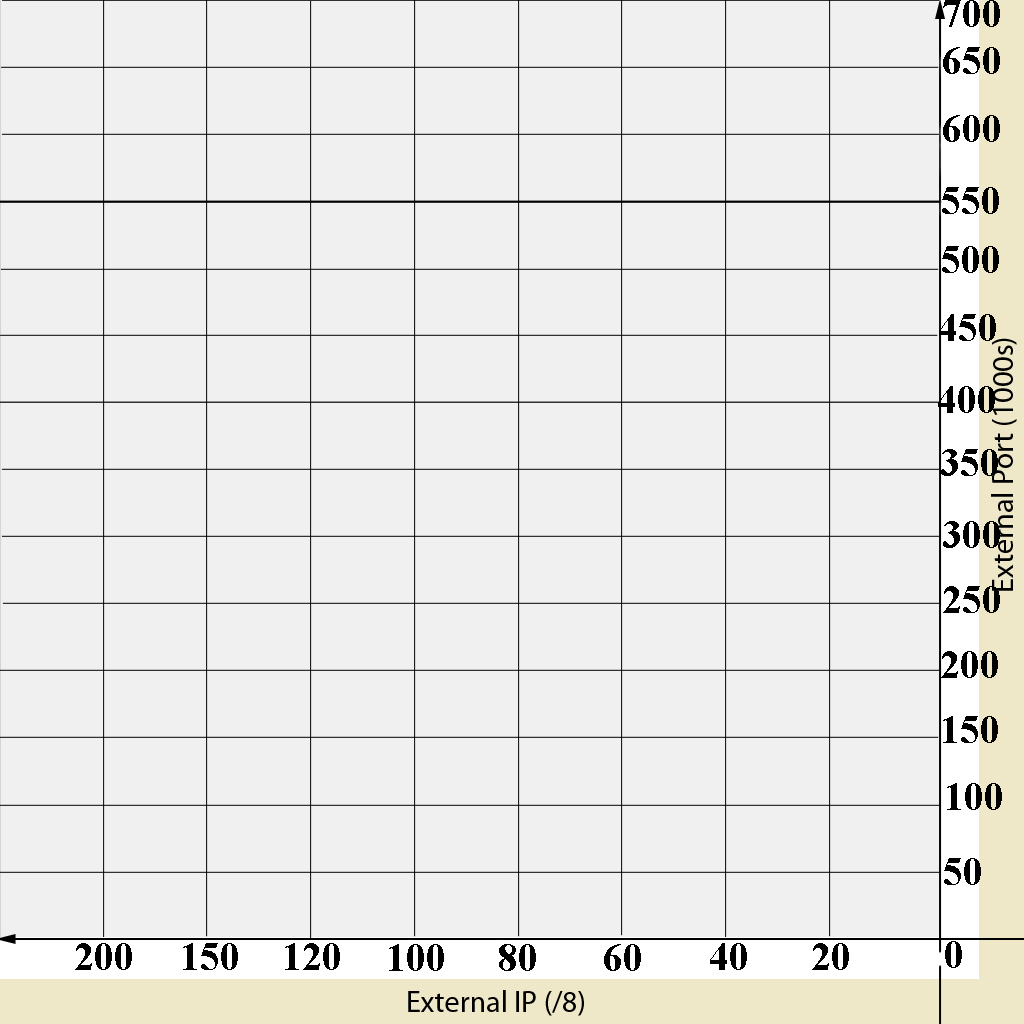
<style>
.page{position:relative;width:1024px;height:1024px;background:#f0f0f0}
.page>*{position:absolute;margin:0}
.t1{font:40px "TimesNewRomanPS-BoldMT";color:#000000}
</style>
<div class="page">
<p class="t1" style="left:943px;top:0px;width:57px;height:27px">700</p>
<p class="t1" style="left:943px;top:47px;width:57px;height:27px">650</p>
<p class="t1" style="left:943px;top:115px;width:57px;height:27px">600</p>
<p class="t1" style="left:942px;top:187px;width:57px;height:27px">550</p>
<p class="t1" style="left:942px;top:246px;width:57px;height:27px">500</p>
<p class="t1" style="left:939px;top:314px;width:57px;height:27px">450</p>
<p class="t1" style="left:938px;top:386px;width:57px;height:27px">400</p>
<p class="t1" style="left:941px;top:449px;width:57px;height:27px">350</p>
<p class="t1" style="left:943px;top:521px;width:57px;height:27px">300</p>
<p class="t1" style="left:943px;top:586px;width:57px;height:27px">250</p>
<p class="t1" style="left:943px;top:586px;width:57px;height:27px">250</p>
<p class="t1" style="left:941px;top:651px;width:57px;height:27px">200</p>
<p class="t1" style="left:943px;top:716px;width:55px;height:27px">150</p>
<p class="t1" style="left:947px;top:783px;width:55px;height:27px">100</p>
<p class="t1" style="left:944px;top:858px;width:37px;height:27px">50</p>
<p class="t1" style="left:945px;top:941px;width:17px;height:27px">0</p>
<p class="t1" style="left:75px;top:943px;width:57px;height:27px">200</p>
<p class="t1" style="left:183px;top:943px;width:55px;height:27px">150</p>
<p class="t1" style="left:285px;top:943px;width:55px;height:27px">120</p>
<p class="t1" style="left:389px;top:944px;width:55px;height:27px">100</p>
<p class="t1" style="left:499px;top:944px;width:37px;height:27px">80</p>
<p class="t1" style="left:604px;top:944px;width:37px;height:27px">60</p>
<p class="t1" style="left:710px;top:943px;width:37px;height:27px">40</p>
<p class="t1" style="left:812px;top:943px;width:37px;height:27px">20</p>
</div>
